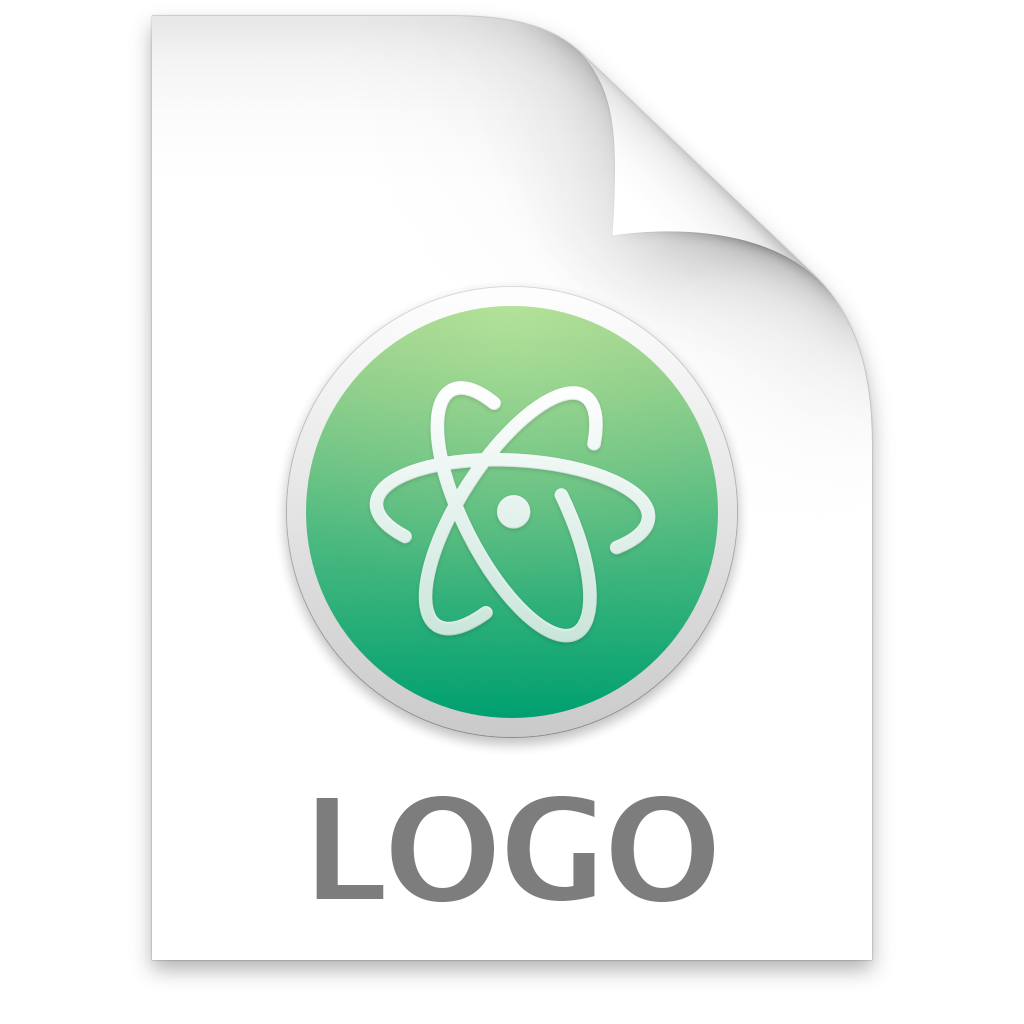
<style>
.page{position:relative;width:1024px;height:1024px;background:#ffffff}
.page>*{position:absolute;margin:0}
.t1{font:140px "LucidaGrande-Bold";color:#7d7d7d}
</style>
<div class="page">
<p class="t1" style="left:316px;top:796px;width:398px;height:106px">LOGO</p>
</div>
